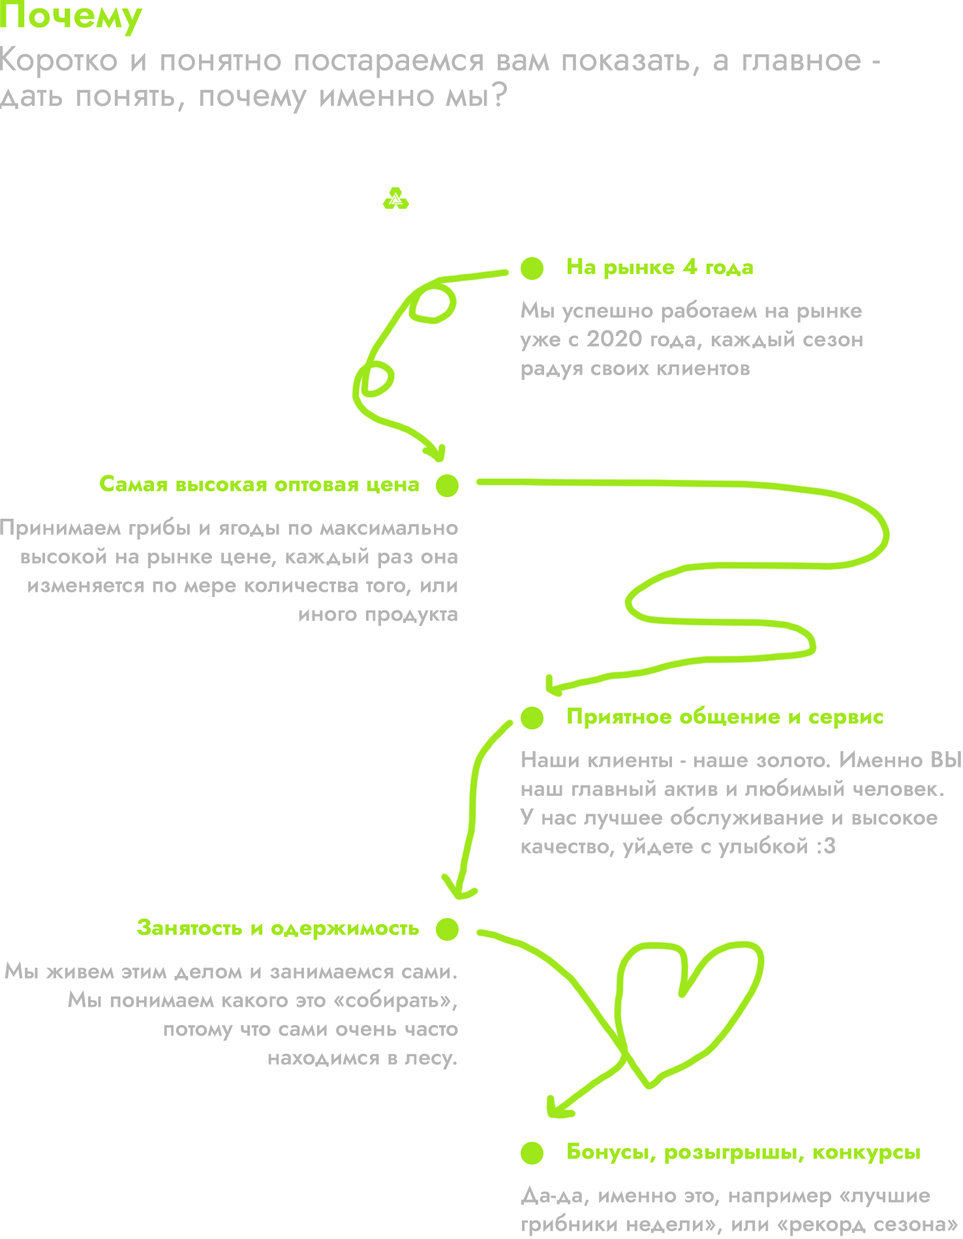
<style>
.page{position:relative;width:963px;height:1239px;background:#ffffff}
.page>*{position:absolute;margin:0}
.t1{font:22.5px "JostRoman-Bold";letter-spacing:0.01em;color:#9ee71a}
.t2{font:22.5px/28.7px "JostRoman-Medium";letter-spacing:0.01em;color:#b5b5b5}
</style>
<div class="page">
<p class="t1" style="left:567px;top:258px;width:186px;height:21px">На рынке 4 года</p>
<p class="t2" style="left:520px;top:299px;width:342px;height:81px">Мы успешно работаем на рынке<br>уже с 2020 года, каждый сезон<br>радуя своих клиентов</p>
<p class="t1" style="left:100px;top:474px;width:319px;height:20px">Самая высокая оптовая цена</p>
<p class="t2" style="left:0px;top:517px;width:458px;height:109px;text-align:right">Принимаем грибы и ягоды по максимально<br>высокой на рынке цене, каждый раз она<br>изменяется по мере количества того, или<br>иного продукта</p>
<p class="t1" style="left:567px;top:705px;width:316px;height:24px">Приятное общение и сервис</p>
<p class="t1" style="left:137px;top:918px;width:282px;height:22px">Занятость и одержимость</p>
<p class="t2" style="left:5px;top:961px;width:453px;height:109px;text-align:right">Мы живем этим делом и занимаемся сами.<br>Мы понимаем какого это «собирать»,<br>потому что сами очень часто<br>находимся в лесу.</p>
<p class="t1" style="left:567px;top:1142px;width:353px;height:22px">Бонусы, розыгрышы, конкурсы</p>
<p class="t2" style="left:520px;top:1185px;width:437px;height:51px">Да-да, именно это, например «лучшие<br>грибники недели», или «рекорд сезона»</p>
</div>
